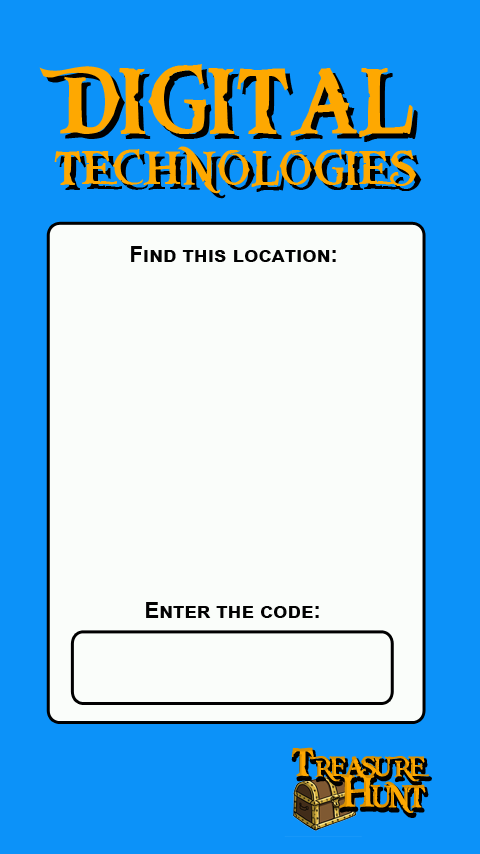
<style>
.page{position:relative;width:480px;height:854px;background:#0c92f9}
.page>*{position:absolute;margin:0}
.t1{font:50.8px/50.1px "PiecesofEight";color:#fea801;font-variant:small-caps}
.t2{font:99px "PiecesofEight";color:#fea801;font-variant:small-caps}
.t3{font:50.8px/50.1px "PiecesofEight";font-variant:small-caps}
.t4{font:99px "PiecesofEight";font-variant:small-caps}
.t5{font:21.9px "Arial-BoldMT";color:#020202;font-variant:small-caps}
.t6{font:42.4px/31.3px "PiecesofEight";letter-spacing:-0.12em;font-variant:small-caps}
.t7{font:48.5px/31.3px "PiecesofEight";letter-spacing:-0.12em;font-variant:small-caps}
</style>
<div class="page">
<p class="t1" style="left:39px;top:64px;width:378px;height:130px;text-align:center"><span class="t2">DIGITAL<br></span>TECHNOLOGIES</p>
<p class="t3" style="left:44px;top:69px;width:378px;height:130px;text-align:center"><span class="t4">DIGITAL<br></span>TECHNOLOGIES</p>
<p class="t5" style="left:131px;top:246px;width:205px;height:16px">Find this location:</p>
<p class="t5" style="left:146px;top:602px;width:173px;height:16px">Enter the code:</p>
<p class="t6" style="left:291px;top:747px;width:138px;height:66px;text-align:right">Treasure<br><span class="t7">Hunt</span></p>
<p class="t6" style="left:293px;top:751px;width:138px;height:66px;text-align:right">Treasure<br><span class="t7">Hunt</span></p>
</div>
